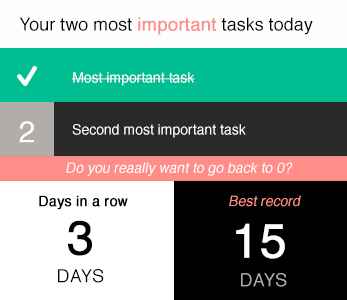
<style>
.page{position:relative;width:347px;height:300px}
.page>*{position:absolute;margin:0}
.t1{font:18px "Helvetica";color:#000000}
.t2{font:18px "Helvetica";color:#ff8e88;font-weight:bold}
.t3{font:14px "Helvetica";color:#ffffff}
.t4{font:30px "Helvetica";color:#ffffff}
.t5{font:14px "Helvetica";color:#ffffff;font-style:italic}
.t6{font:14px "Helvetica";color:#000000;font-weight:bold}
.t7{font:14px "Helvetica";color:#ff8e88;font-style:italic}
.t8{font:48px "Helvetica";color:#000000;font-weight:bold}
.t9{font:48px "Helvetica";color:#ffffff;font-weight:bold}
.t10{font:18px "Helvetica";color:#b1aea9}
</style>
<div class="page">
<p class="t1" style="left:19px;top:17px;width:294px;height:18px">Your two most <span class="t2">important</span> tasks today</p>
<p class="t3" style="left:72px;top:72px;width:123px;height:14px">Most important task</p>
<p class="t3" style="left:73px;top:72px;width:121px;height:14px">Most important task</p>
<p class="t4" style="left:19px;top:121px;width:15px;height:22px">2</p>
<p class="t3" style="left:72px;top:124px;width:174px;height:14px">Second most important task</p>
<p class="t5" style="left:66px;top:162px;width:227px;height:14px">Do you reaally want to go back to 0?</p>
<p class="t6" style="left:39px;top:195px;width:89px;height:15px">Days in a row</p>
<p class="t7" style="left:229px;top:195px;width:72px;height:12px">Best record</p>
<p class="t8" style="left:68px;top:220px;width:24px;height:36px">3</p>
<p class="t9" style="left:236px;top:223px;width:49px;height:36px">15</p>
<p class="t1" style="left:58px;top:269px;width:46px;height:14px">DAYS</p>
<p class="t10" style="left:241px;top:273px;width:46px;height:14px">DAYS</p>
</div>
